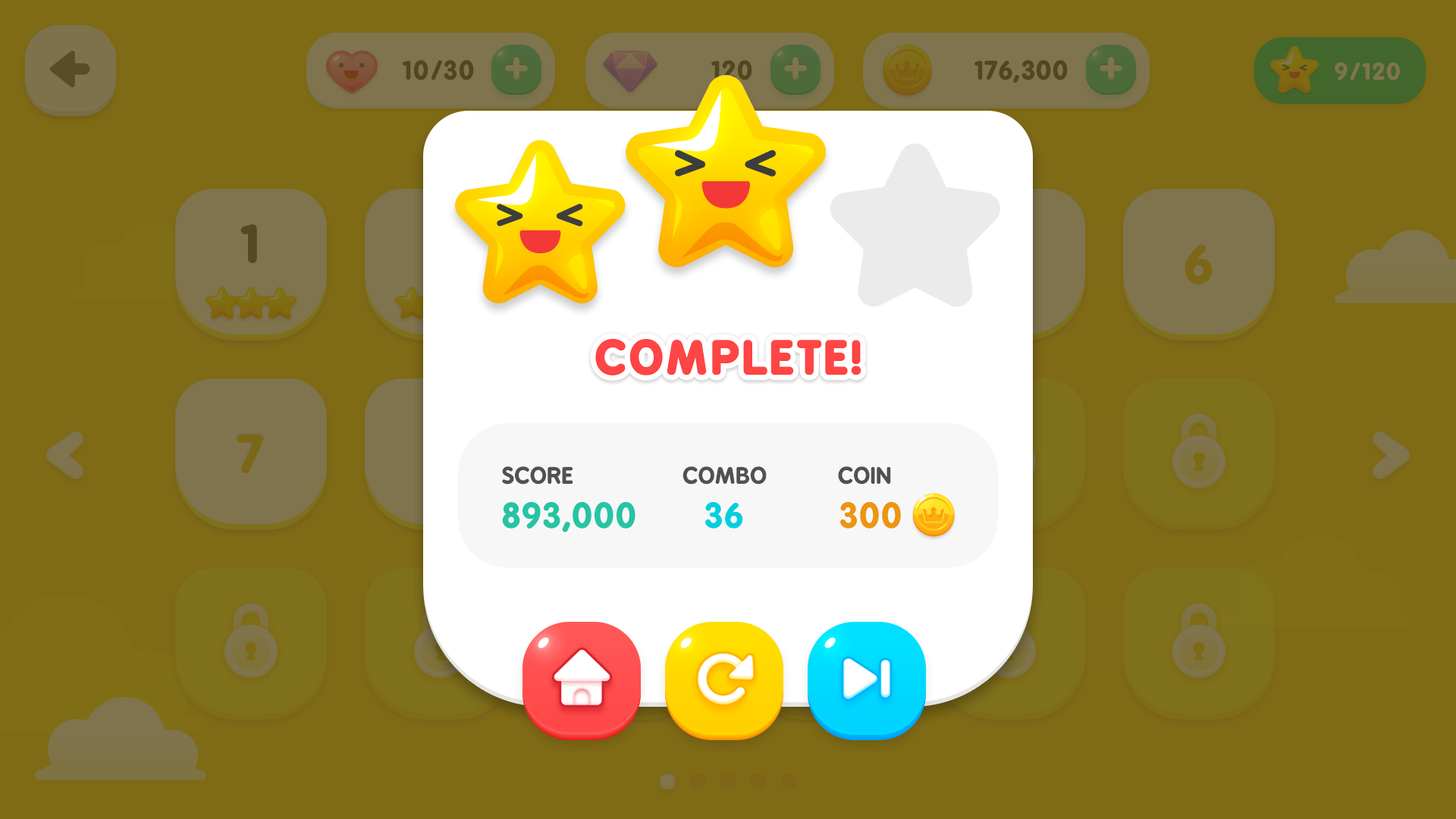
<style>
.page{position:relative;width:1456px;height:819px;background:#7f6a15}
.page>*{position:absolute;margin:0}
.t1{font:43.2px "BPreplay-Bold";letter-spacing:0.03em;color:#ff4646;text-transform:uppercase;font-weight:bold;scale:1.05 1}
.t2{font:21.6px "BPreplay-Bold";letter-spacing:-0.025em;color:#515151;text-transform:uppercase;scale:1.05 1}
.t3{font:33.7px "BPreplay-Bold";color:#25c4a4;text-transform:uppercase;scale:1.05 1}
.t4{font:33.7px "BPreplay-Bold";color:#00cfdf;text-transform:uppercase;scale:1.05 1}
.t5{font:33.7px "BPreplay-Bold";color:#ed9510;text-transform:uppercase;scale:1.05 1}
</style>
<div class="page">
<p class="t1" style="left:595px;top:338px;width:266px;height:37px">Complete!</p>
<p class="t2" style="left:502px;top:466px;width:71px;height:19px">Score</p>
<p class="t2" style="left:682px;top:466px;width:85px;height:19px">Combo</p>
<p class="t2" style="left:838px;top:466px;width:53px;height:19px">Coin</p>
<p class="t3" style="left:502px;top:502px;width:133px;height:30px">893,000</p>
<p class="t4" style="left:705px;top:502px;width:38px;height:27px">36</p>
<p class="t5" style="left:840px;top:502px;width:61px;height:27px">300</p>
</div>
